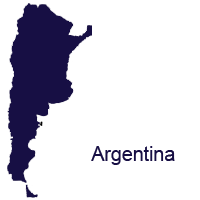
<style>
.page{position:relative;width:200px;height:200px;background:#ffffff}
.page>*{position:absolute;margin:0}
.t1{font:20.8px "ArialMT";color:#170f44;scale:0.94 1}
</style>
<div class="page">
<p class="t1" style="left:91px;top:146px;width:84px;height:19px">Argentina</p>
</div>
